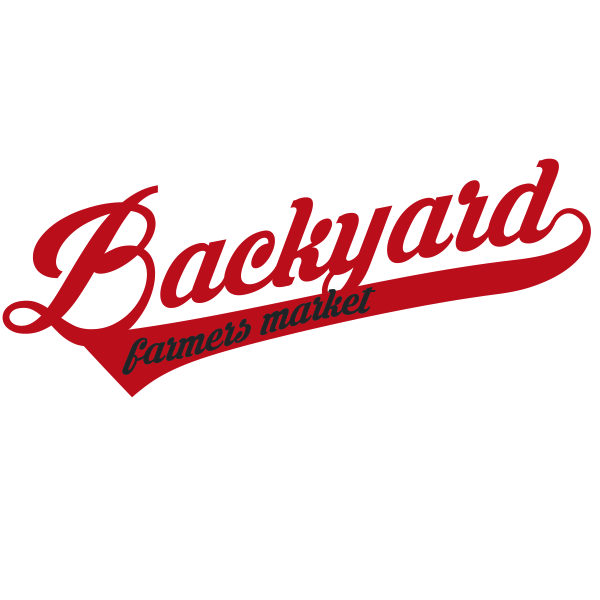
<style>
.page{position:relative;width:600px;height:600px;background:#ffffff}
.page>*{position:absolute;margin:0}
.t1{font:150px "KrinkesDecorPERSONALUSE";color:#bb0e1b}
.t2{font:50px "KrinkesDecorPERSONALUSE";color:#1f2526}
</style>
<div class="page">
<p class="t1" style="left:2px;top:158px;width:589px;height:240px">Backyard4</p>
<p class="t2" style="left:122px;top:287px;width:254px;height:88px;text-align:center">farmers market</p>
</div>
